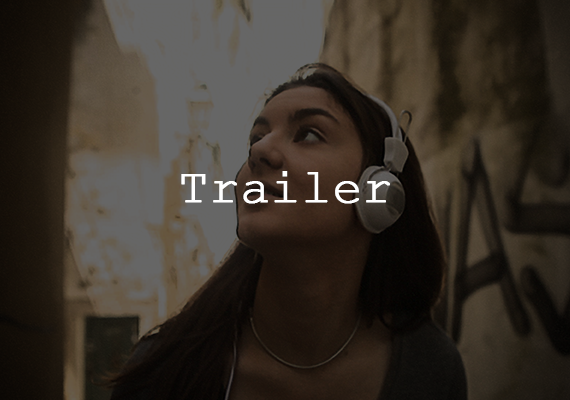
<style>
.page{position:relative;width:570px;height:400px}
.page>*{position:absolute;margin:0}
.t1{font:48.9px "CourierNewPSMT";color:#ffffff;font-weight:bold}
</style>
<div class="page">
<p class="t1" style="left:181px;top:171px;width:209px;height:33px">Trailer</p>
</div>
